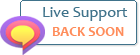
<style>
.page{position:relative;width:140px;height:55px;background:#ffffff}
.page>*{position:absolute;margin:0}
.t1{font:16px "Candara";color:#40738b}
.t2{font:14px "Candara-Bold";color:#ff8c5a}
</style>
<div class="page">
<p class="t1" style="left:43px;top:7px;width:85px;height:14px">Live Support</p>
<p class="t2" style="left:52px;top:27px;width:72px;height:9px">BACK SOON</p>
</div>
